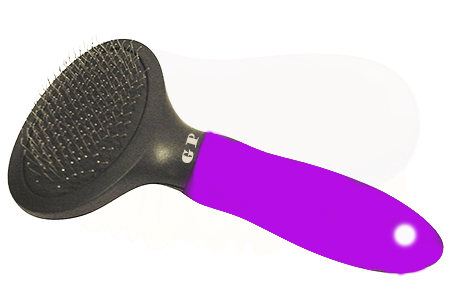
<style>
.page{position:relative;width:450px;height:300px;background:#ffffff}
.page>*{position:absolute;margin:0}
.t1{font:14px "GoudyStout";color:#e4dac8}
</style>
<div class="page">
<p class="t1" style="left:182px;top:133px;width:17px;height:30px;rotate:-73deg">GP</p>
</div>
